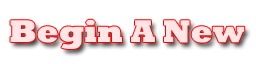
<style>
.page{position:relative;width:256px;height:64px;background:#ffffff}
.page>*{position:absolute;margin:0}
.t1{font:32px "Rockwell-ExtraBold";color:#ffe6e6}
</style>
<div class="page">
<p class="t1" style="left:10px;top:19px;width:235px;height:30px">Begin A New</p>
</div>
